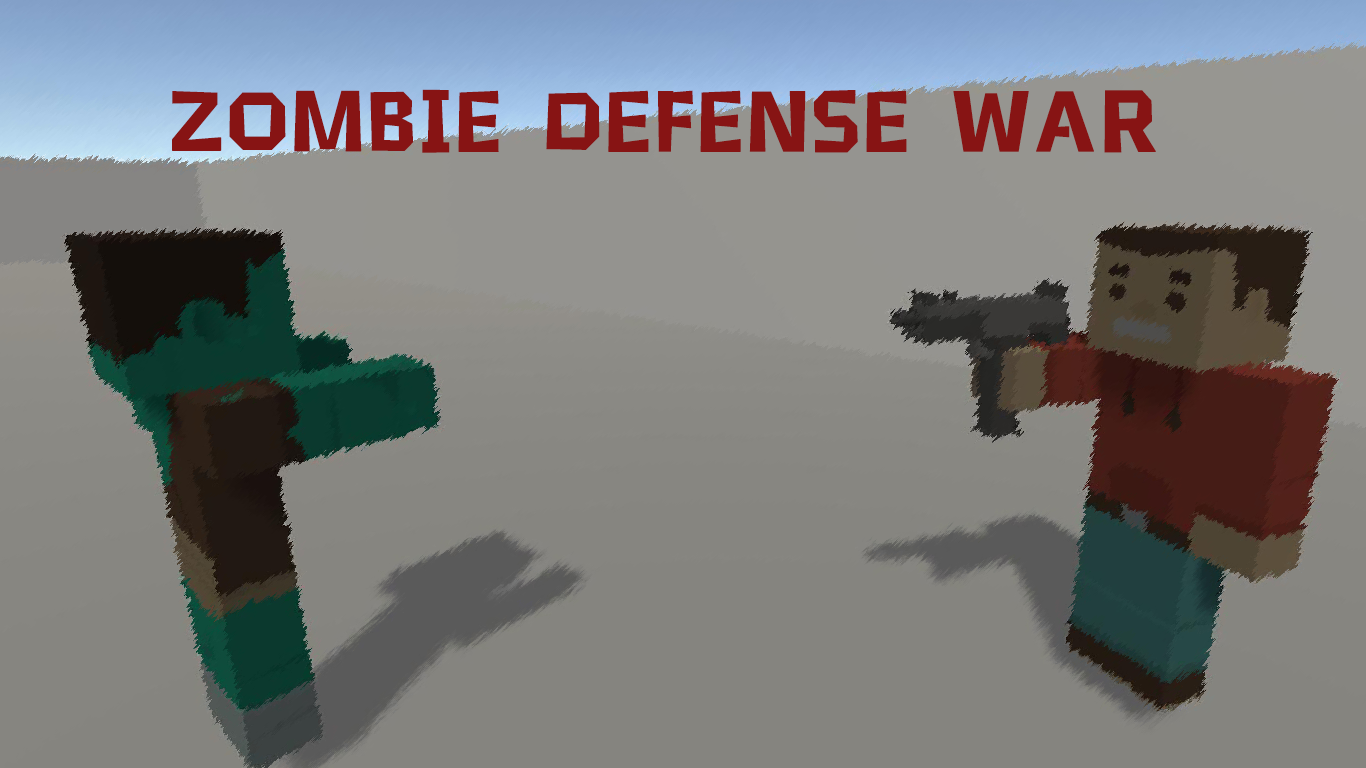
<style>
.page{position:relative;width:1366px;height:768px}
.page>*{position:absolute;margin:0}
.t1{font:90px "HYZhuZiMuTouRenW";color:#871414;text-transform:uppercase;font-weight:bold}
</style>
<div class="page">
<p class="t1" style="left:172px;top:89px;width:984px;height:64px">Zombie defense war</p>
</div>
